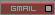
<style>
.page{position:relative;width:55px;height:15px;background:#843939}
.page>*{position:absolute;margin:0}
.t1{font:8px "BitDustTwo";color:#999999}
</style>
<div class="page">
<p class="t1" style="left:11px;top:6px;width:25px;height:5px">GMAIL</p>
</div>
